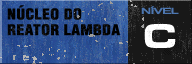
<style>
.page{position:relative;width:192px;height:64px}
.page>*{position:absolute;margin:0}
.t1{font:14.6px/15.8px "HelveticaLT-Condensed-Black";letter-spacing:0.03em;color:#000000;scale:1.07 1}
.t2{font:8px "Helvetica";letter-spacing:-0.08em;color:#4a73ad;text-transform:uppercase;font-weight:bold;scale:1.75 1}
</style>
<div class="page">
<p class="t1" style="left:7px;top:5px;width:113px;height:31px">NÚCLEO DO<br>REATOR LAMBDA</p>
<p class="t2" style="left:141px;top:6px;width:38px;height:8px">NÍVEL</p>
</div>
